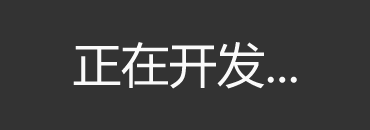
<style>
.page{position:relative;width:370px;height:130px;background:#333333}
.page>*{position:absolute;margin:0}
.t1{font:48px "MicrosoftYaHei";color:#fafafa}
</style>
<div class="page">
<p class="t1" style="left:73px;top:42px;width:224px;height:47px">正在开发...</p>
</div>
